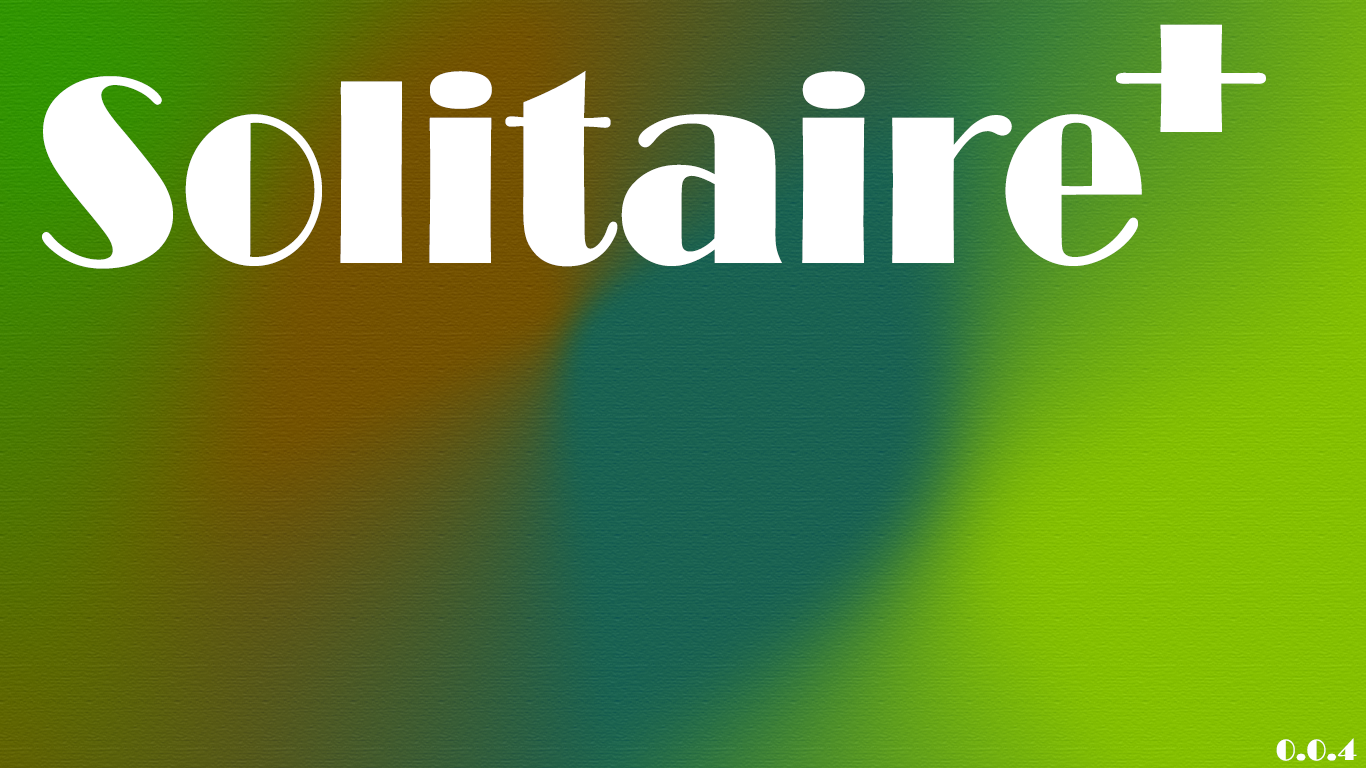
<style>
.page{position:relative;width:1366px;height:768px}
.page>*{position:absolute;margin:0}
.t1{font:272px "Broadway";color:#ffffff}
.t2{font:272px "Broadway";color:#ffffff;scale:0.9 1}
.t3{font:30px "Broadway";color:#ffffff}
</style>
<div class="page">
<p class="t1" style="left:1116px;top:24px;width:150px;height:108px">+</p>
<p class="t2" style="left:42px;top:71px;width:1100px;height:198px">Solitaire</p>
<p class="t3" style="left:1276px;top:738px;width:81px;height:23px">0.0.4</p>
</div>
